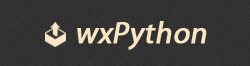
<style>
.page{position:relative;width:250px;height:66px}
.page>*{position:absolute;margin:0}
.t1{font:30px "MyriadPro-Regular";color:#f7e5c4;font-weight:bold;font-style:italic}
</style>
<div class="page">
<p class="t1" style="left:77px;top:21px;width:130px;height:29px">wxPython</p>
</div>
